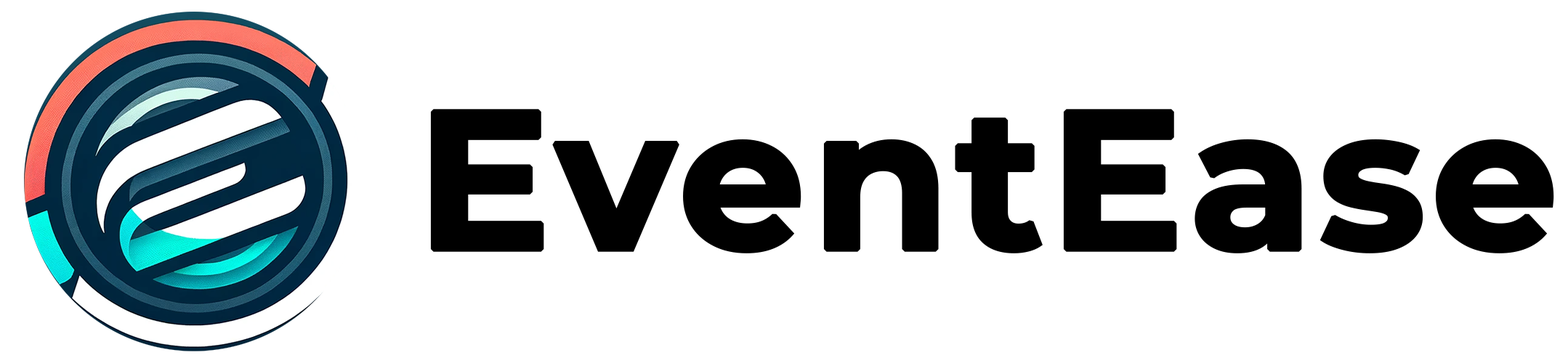
<style>
.page{position:relative;width:1568px;height:363px;background:#ffffff}
.page>*{position:absolute;margin:0}
.t1{font:196.2px "Montserrat-Bold";letter-spacing:0.01em;color:#000000;font-weight:bold}
</style>
<div class="page">
<p class="t1" style="left:430px;top:109px;width:1124px;height:145px">EventEase</p>
</div>
